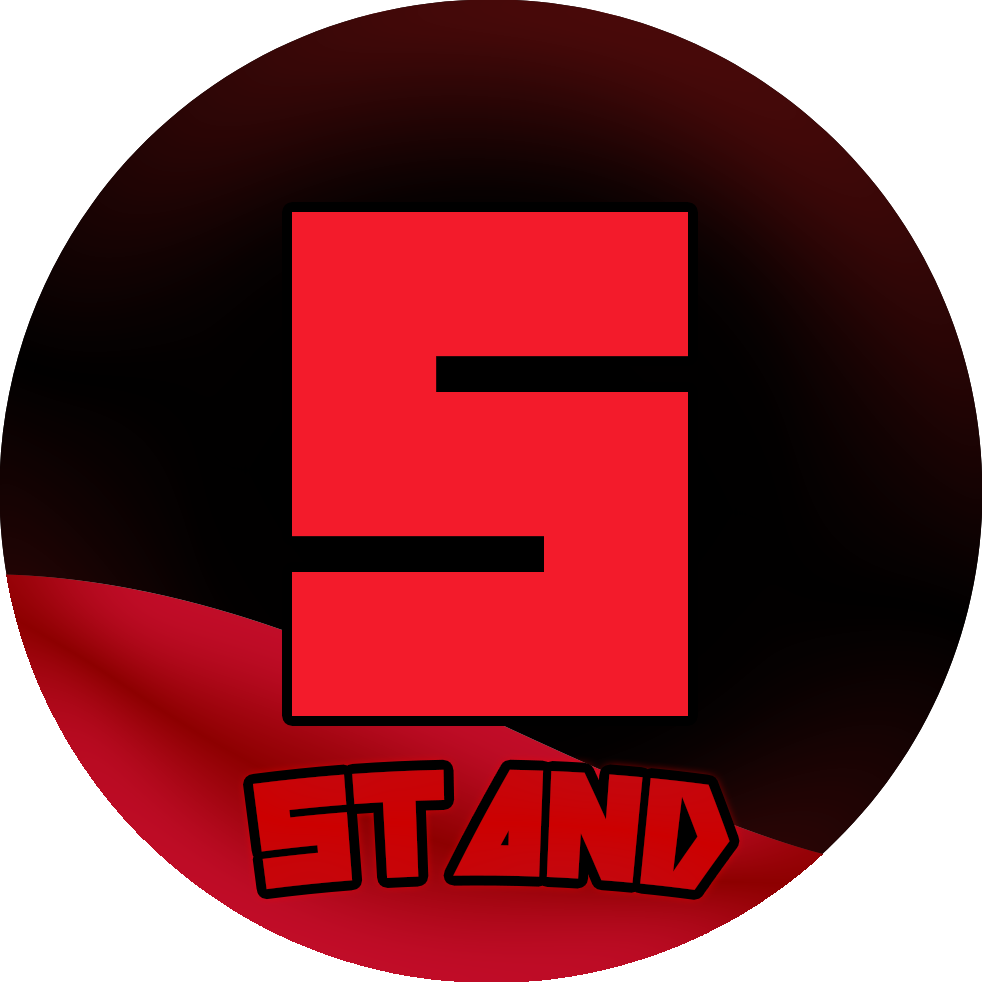
<style>
.page{position:relative;width:982px;height:982px;background:#ffffff}
.page>*{position:absolute;margin:0}
.t1{font:575.8px "Russian";color:#f31b2b}
.t2{font:121.4px "Russian";color:#c80307}
</style>
<div class="page">
<p class="t1" style="left:292px;top:212px;width:396px;height:504px">S</p>
<p class="t2" style="left:253px;top:769px;width:477px;height:121px;rotate:1deg">STAND</p>
</div>
